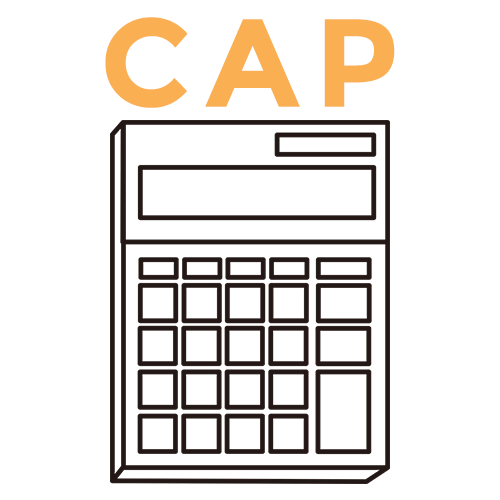
<style>
.page{position:relative;width:500px;height:500px;background:#ffffff}
.page>*{position:absolute;margin:0}
.t1{font:125px "Montserrat-Bold";letter-spacing:0.12em;color:#fbaf53}
</style>
<div class="page">
<p class="t1" style="left:105px;top:17px;width:290px;height:91px">CAP</p>
</div>
